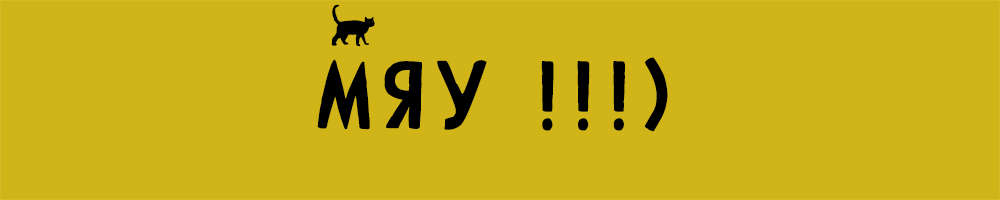
<style>
.page{position:relative;width:1000px;height:200px;background:#d1b518}
.page>*{position:absolute;margin:0}
.t1{font:48px "ComicCAT";letter-spacing:0.1em;color:#000000;scale:0.97 1}
.t2{font:94.6px "ComicCAT";letter-spacing:0.1em;color:#000000}
</style>
<div class="page">
<p class="t1" style="left:331px;top:4px;width:44px;height:43px">ä</p>
<p class="t2" style="left:317px;top:57px;width:351px;height:75px">Мяу !!!)</p>
</div>
